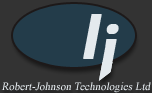
<style>
.page{position:relative;width:152px;height:93px;background:#233c4a}
.page>*{position:absolute;margin:0}
.t1{font:61.3px "TrebuchetMS";color:#e4eaee;font-weight:bold;font-style:italic;scale:1.29 1}
.t2{font:11px "TimesNewRomanPSMT";color:#e4eaee;font-style:italic}
</style>
<div class="page">
<p class="t1" style="left:83px;top:14px;width:19px;height:45px">I</p>
<p class="t2" style="left:1px;top:82px;width:150px;height:11px">Robert-Johnson Technologies Ltd</p>
</div>
